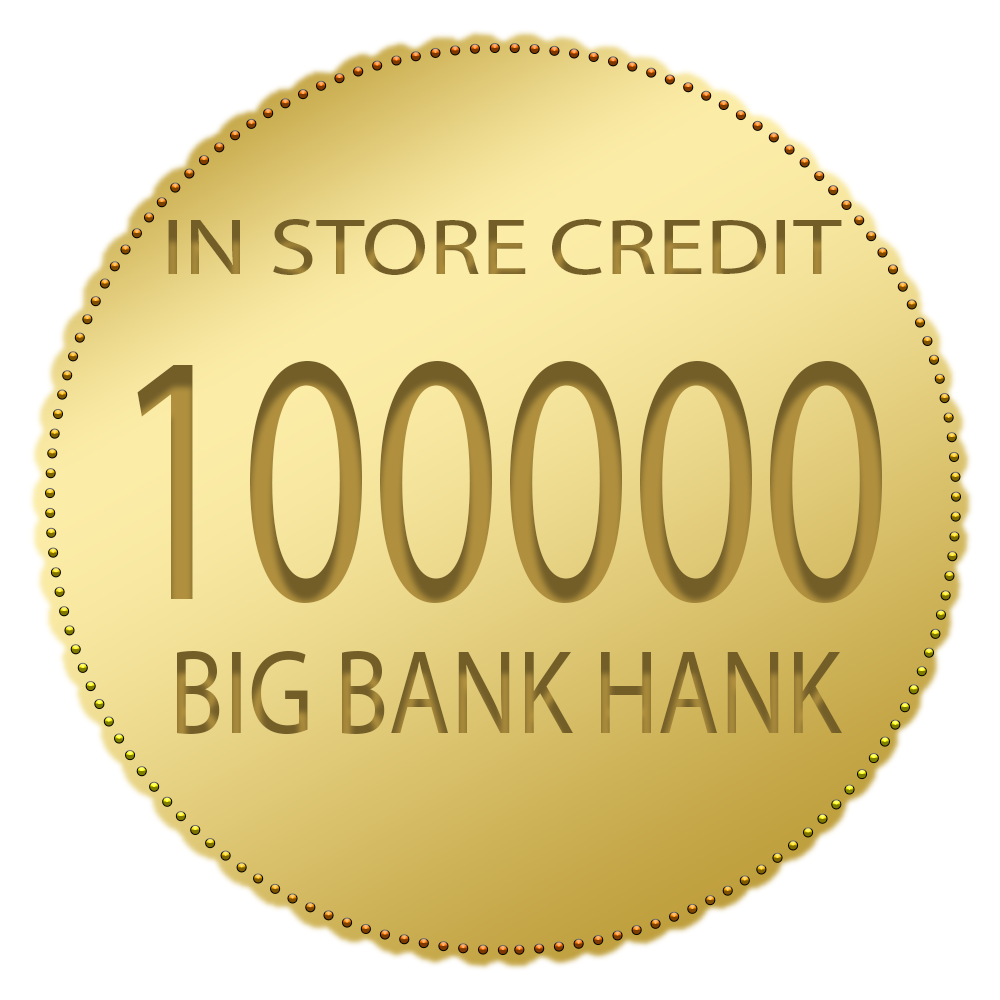
<style>
.page{position:relative;width:1000px;height:1000px;background:#ffffff}
.page>*{position:absolute;margin:0}
.t1{font:80px "MyriadPro-Regular";scale:1.21 1}
.t2{font:360.4px "MyriadPro-Regular";color:#b0903e;scale:0.7 1}
.t3{font:120px "MyriadPro-Regular";scale:0.84 1}
</style>
<div class="page">
<p class="t1" style="left:168px;top:219px;width:674px;height:56px">IN STORE CREDIT</p>
<p class="t2" style="left:137px;top:361px;width:745px;height:242px">100000</p>
<p class="t3" style="left:177px;top:651px;width:665px;height:84px">BIG BANK HANK</p>
</div>
